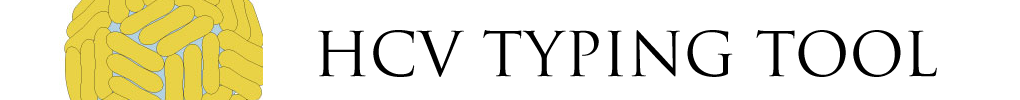
<style>
.page{position:relative;width:1020px;height:100px;background:#ffffff}
.page>*{position:absolute;margin:0}
.t1{font:60px "TrajanPro-Regular";color:#000000}
</style>
<div class="page">
<p class="t1" style="left:318px;top:30px;width:619px;height:47px">HCV TYPING TOOL</p>
</div>
